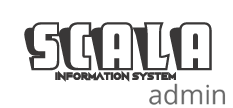
<style>
.page{position:relative;width:233px;height:108px;background:#ffffff}
.page>*{position:absolute;margin:0}
.t1{font:66px "Sho-CardCapsNF";color:#393737}
.t2{font:11px "NightMachine";color:#393737}
</style>
<div class="page">
<p class="t1" style="left:24px;top:22px;width:188px;height:49px">SCALA</p>
<p class="t2" style="left:55px;top:70px;width:121px;height:12px">Information System</p>
</div>
